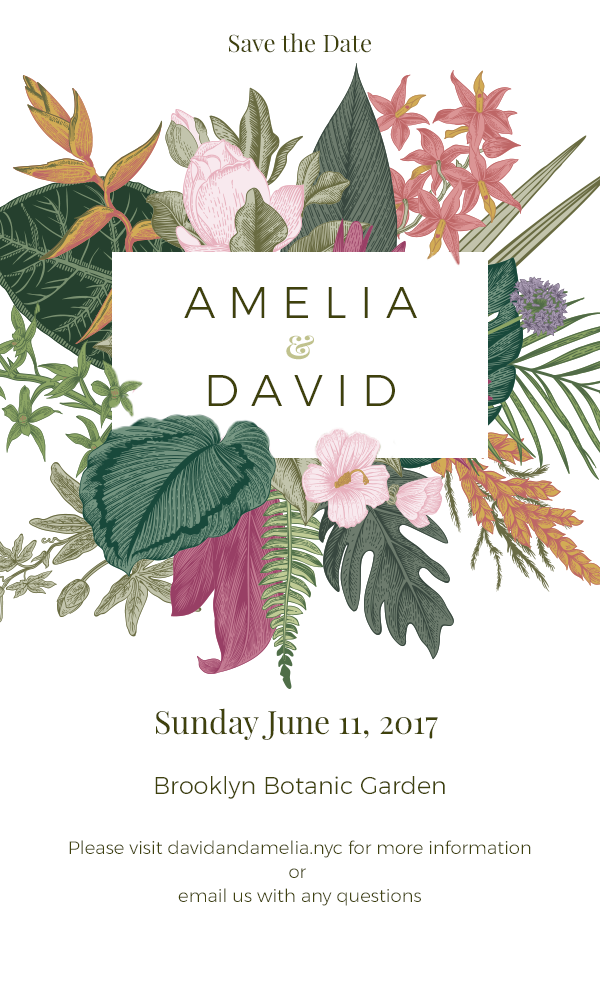
<style>
.page{position:relative;width:600px;height:1000px;background:#ffffff}
.page>*{position:absolute;margin:0}
.t1{font:24px "PlayfairDisplay-Regular";color:#3f410c}
.t2{font:43.9px/87.9px "Montserrat-Light";letter-spacing:0.3em;color:#3f410c;text-transform:uppercase}
.t3{font:33px "PlayfairDisplay-Bold";letter-spacing:0.3em;color:#c0c28d;text-transform:uppercase}
.t4{font:18px/24px "Montserrat-Light";color:#3f410c}
.t5{font:32px/36px "PlayfairDisplay-Regular";color:#3f410c}
.t6{font:24px/36px "Montserrat-Light";color:#3f410c}
.t7{font:18px/36px "Montserrat-Light";color:#3f410c}
</style>
<div class="page">
<p class="t1" style="left:229px;top:33px;width:142px;height:20px">Save the Date</p>
<p class="t2" style="left:184px;top:287px;width:233px;height:119px;text-align:center">Amelia<br>David</p>
<p class="t3" style="left:286px;top:335px;width:28px;height:25px">&amp;</p>
<p class="t4" style="left:69px;top:708px;width:462px;height:198px;text-align:center"><span class="t5">Sunday June 11, 2017 <br></span><span class="t6">Brooklyn Botanic Garden</span><span class="t7"><br>Please visit </span>davidandamelia.nyc for more information<br>or <br>email us with any questions</p>
</div>
